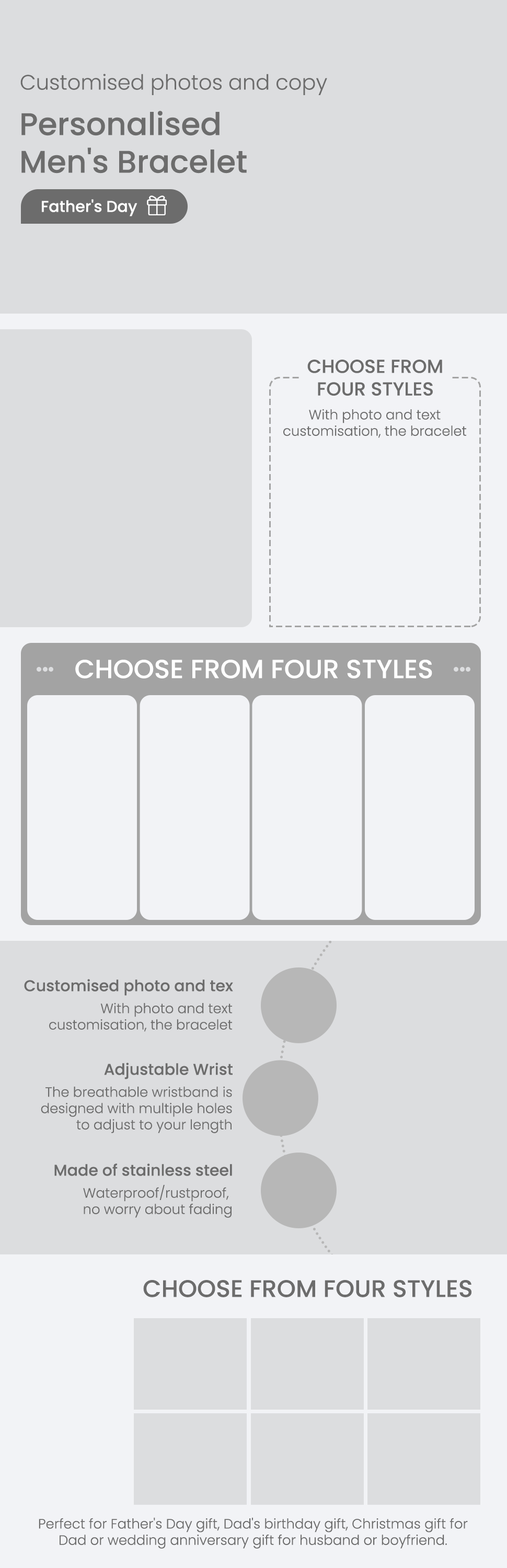
<style>
.page{position:relative;width:507px;height:1568px;background:#dcdddf}
.page>*{position:absolute;margin:0}
.t1{font:20.9px "Poppins-Light";color:#6c6c6c}
.t2{font:31.4px "Poppins-Medium";color:#6c6c6c}
.t3{font:15.7px "Poppins-Medium";color:#ffffff}
.t4{font:18.8px "Poppins-Medium";color:#6c6c6c}
.t5{font:13.6px "Poppins-Light";color:#6c6c6c}
.t6{font:26.1px "Poppins-Medium";color:#ffffff}
.t7{font:15.7px "Poppins-Medium";color:#6c6c6c}
.t8{font:24px "Poppins-Medium";color:#6c6c6c}
</style>
<div class="page">
<p class="t1" style="left:20px;top:74px;width:307px;height:21px">Customised photos and copy</p>
<p class="t2" style="left:21px;top:111px;width:226px;height:63px">Personalised<br>Men's Bracelet</p>
<p class="t3" style="left:42px;top:199px;width:95px;height:17px">Father's Day</p>
<p class="t4" style="left:307px;top:360px;width:135px;height:36px;text-align:center">CHOOSE FROM<br>FOUR STYLES</p>
<p class="t5" style="left:283px;top:409px;width:183px;height:29px;text-align:center">With photo and text<br>customisation, the bracelet</p>
<p class="t6" style="left:75px;top:660px;width:357px;height:18px">CHOOSE FROM FOUR STYLES</p>
<p class="t7" style="left:24px;top:979px;width:209px;height:17px">Customised photo and tex</p>
<p class="t5" style="left:49px;top:1002px;width:183px;height:30px;text-align:right">With photo and text<br>customisation, the bracelet</p>
<p class="t7" style="left:104px;top:1063px;width:129px;height:16px">Adjustable Wrist</p>
<p class="t5" style="left:41px;top:1086px;width:191px;height:47px;text-align:right">The breathable wristband is<br>designed with multiple holes<br>to adjust to your length</p>
<p class="t7" style="left:54px;top:1163px;width:178px;height:13px">Made of stainless steel</p>
<p class="t5" style="left:83px;top:1185px;width:149px;height:33px;text-align:right">Waterproof/rustproof, <br>no worry about fading</p>
<p class="t8" style="left:143px;top:1280px;width:328px;height:17px">CHOOSE FROM FOUR STYLES</p>
<p class="t5" style="left:39px;top:1517px;width:429px;height:32px;text-align:center">Perfect for Father's Day gift, Dad's birthday gift, Christmas gift for<br>Dad or wedding anniversary gift for husband or boyfriend.</p>
</div>
